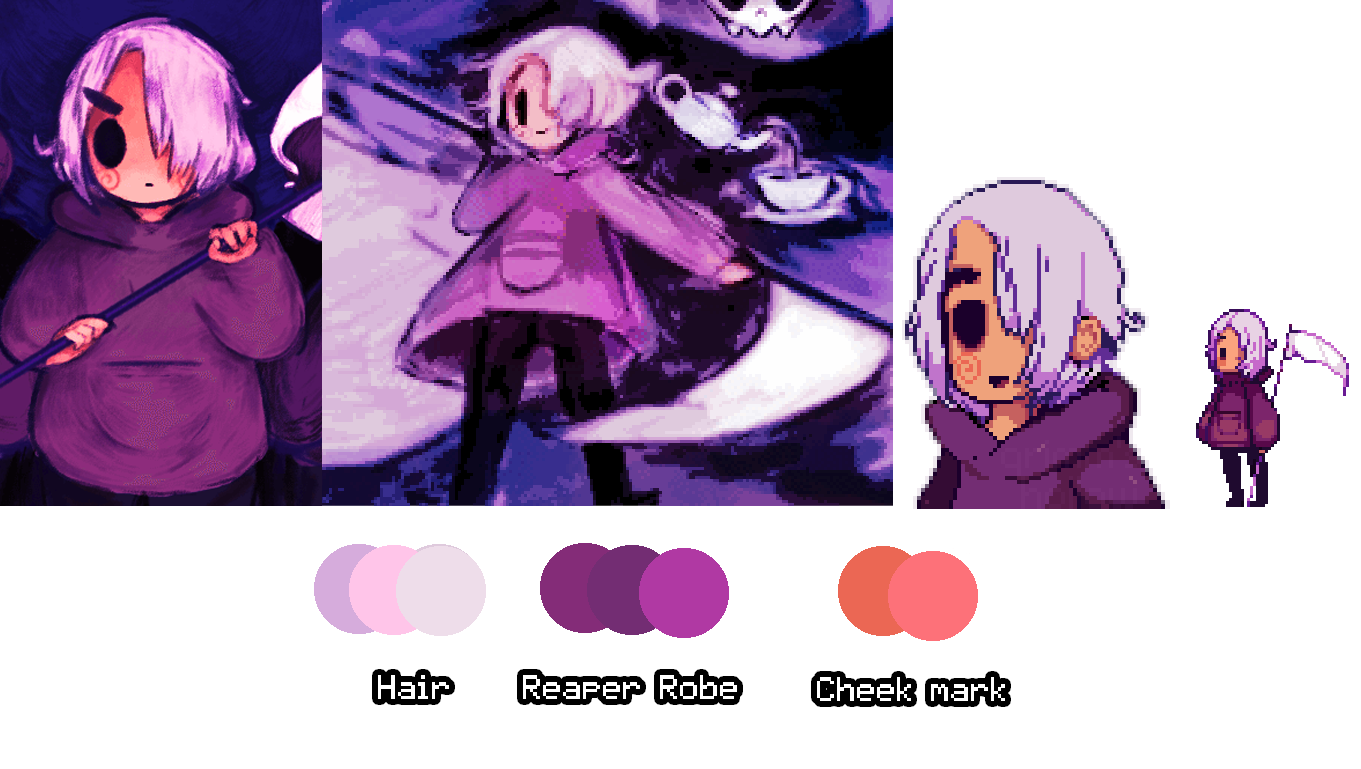
<style>
.page{position:relative;width:1361px;height:769px;background:#ffffff}
.page>*{position:absolute;margin:0}
.t1{font:26.7px "pixelmix";color:#ffffff}
</style>
<div class="page">
<p class="t1" style="left:378px;top:675px;width:71px;height:24px">Hair</p>
<p class="t1" style="left:523px;top:675px;width:214px;height:24px">Reaper Robe</p>
<p class="t1" style="left:817px;top:677px;width:188px;height:24px">Cheek mark</p>
</div>
